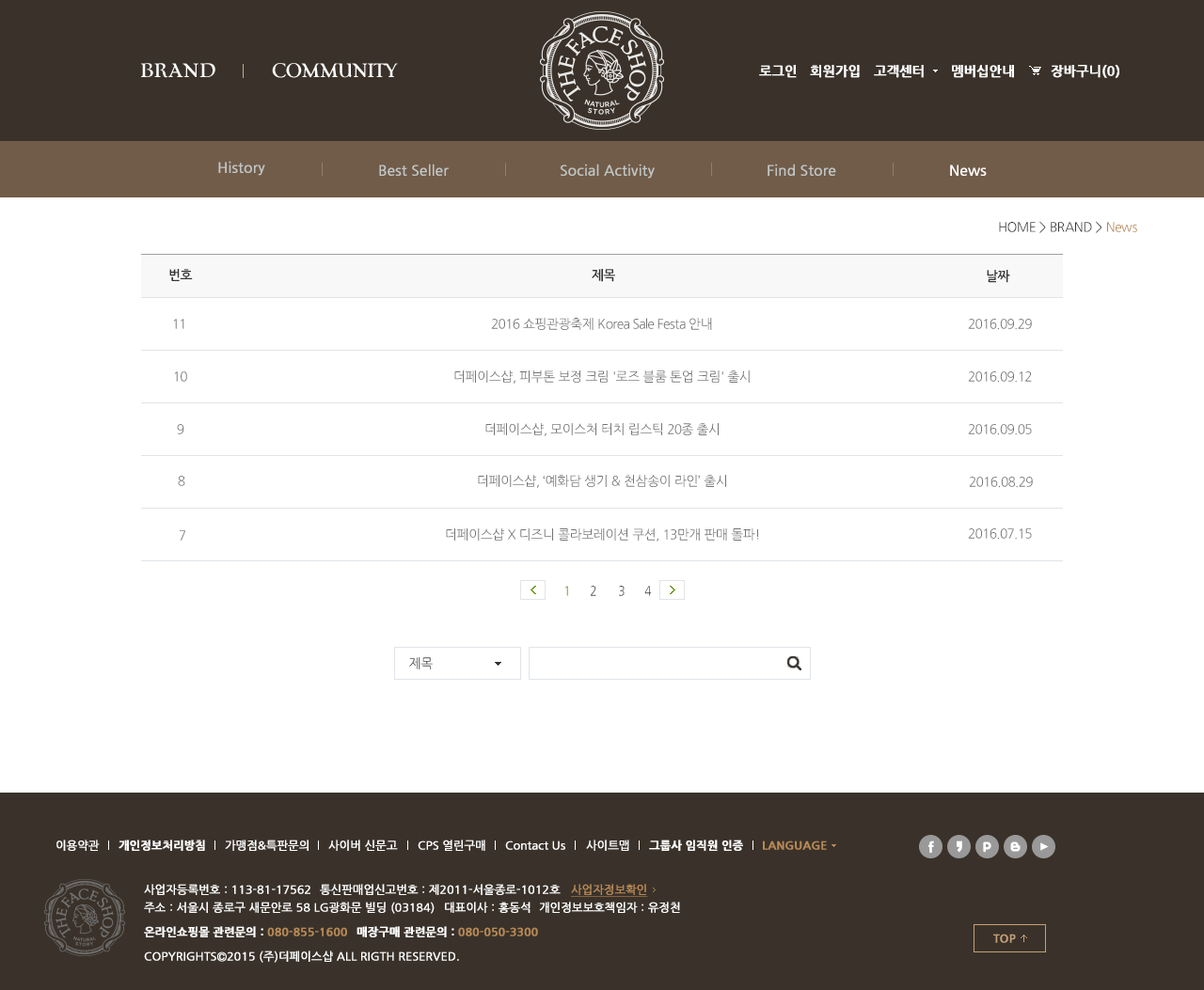
<style>
.page{position:relative;width:1204px;height:990px;background:#ffffff}
.page>*{position:absolute;margin:0}
.t1{font:13.2px "NanumGothicBold";color:#ffffff;font-weight:bold}
.t2{font:14.1px "NanumGothic";color:#c1c6c5;font-weight:bold}
.t3{font:14.1px "NanumGothic";color:#ffffff;font-weight:bold}
.t4{font:13.2px "NanumGothic";letter-spacing:-0.03em;color:#333333}
.t5{font:13.2px "NanumGothic";letter-spacing:-0.03em;color:#b68957}
.t6{font:13.2px "NanumGothicBold";letter-spacing:-0.03em;color:#333333}
.t7{font:13.2px "NanumGothic";letter-spacing:-0.03em;color:#737373}
.t8{font:13.2px "NanumGothic";letter-spacing:-0.03em}
.t9{font:13.2px "NanumGothic";letter-spacing:-0.03em;scale:0.85 1}
.t10{font:13.2px "NanumGothic";letter-spacing:-0.03em;color:#333333;scale:0.85 1}
.t11{font:11.3px "NanumGothic";color:#ffffff;font-weight:bold}
.t12{font:11.3px "NanumGothicBold";color:#ffffff;font-weight:bold}
.t13{font:11.3px "NanumGothicBold";color:#b68957;font-weight:bold}
.t14{font:11.3px "NanumGothic";color:#b68957;font-weight:bold;text-decoration:underline}
</style>
<div class="page">
<p class="t1" style="left:759px;top:65px;width:38px;height:13px">로그인</p>
<p class="t1" style="left:810px;top:65px;width:50px;height:13px">회원가입</p>
<p class="t1" style="left:874px;top:65px;width:50px;height:13px">고객센터</p>
<p class="t1" style="left:952px;top:65px;width:62px;height:13px">멤버십안내</p>
<p class="t1" style="left:1051px;top:65px;width:68px;height:13px">장바구니(0)</p>
<p class="t2" style="left:218px;top:161px;width:47px;height:15px">History</p>
<p class="t2" style="left:379px;top:164px;width:70px;height:12px">Best Seller</p>
<p class="t2" style="left:561px;top:164px;width:94px;height:15px">Social Activity</p>
<p class="t2" style="left:768px;top:164px;width:68px;height:12px">Find Store</p>
<p class="t3" style="left:950px;top:165px;width:37px;height:11px">News</p>
<p class="t4" style="left:999px;top:221px;width:138px;height:12px">HOME &gt; BRAND &gt; <span class="t5">News</span></p>
<p class="t6" style="left:169px;top:269px;width:24px;height:12px">번호</p>
<p class="t6" style="left:592px;top:269px;width:23px;height:13px">제목</p>
<p class="t6" style="left:987px;top:270px;width:23px;height:13px">날짜</p>
<p class="t7" style="left:491px;top:318px;width:221px;height:12px">2016 쇼핑관광축제 Korea Sale Festa 안내</p>
<p class="t8" style="left:173px;top:319px;width:11px;height:10px">11</p>
<p class="t7" style="left:968px;top:319px;width:64px;height:11px">2016.09.29</p>
<p class="t7" style="left:174px;top:372px;width:13px;height:10px">10</p>
<p class="t7" style="left:454px;top:371px;width:296px;height:13px">더페이스샵, 피부톤 보정 크림 '로즈 블룸 톤업 크림' 출시</p>
<p class="t7" style="left:968px;top:372px;width:64px;height:11px">2016.09.12</p>
<p class="t7" style="left:177px;top:424px;width:7px;height:11px">9</p>
<p class="t7" style="left:485px;top:423px;width:234px;height:13px">더페이스샵, 모이스처 터치 립스틱 20종 출시</p>
<p class="t7" style="left:968px;top:424px;width:64px;height:11px">2016.09.05</p>
<p class="t7" style="left:178px;top:476px;width:7px;height:10px">8</p>
<p class="t7" style="left:478px;top:475px;width:248px;height:13px">더페이스샵, ‘예화담 생기 &amp; 천삼송이 라인’ 출시</p>
<p class="t7" style="left:969px;top:477px;width:64px;height:11px">2016.08.29</p>
<p class="t7" style="left:179px;top:530px;width:6px;height:11px">7</p>
<p class="t7" style="left:446px;top:529px;width:313px;height:13px">더페이스샵 X 디즈니 콜라보레이션 쿠션, 13만개 판매 돌파!</p>
<p class="t7" style="left:968px;top:529px;width:64px;height:11px">2016.07.15</p>
<p class="t9" style="left:565px;top:586px;width:3px;height:10px">1</p>
<p class="t9" style="left:591px;top:586px;width:5px;height:10px">2</p>
<p class="t10" style="left:619px;top:586px;width:6px;height:10px">3</p>
<p class="t9" style="left:644px;top:586px;width:8px;height:10px">4</p>
<p class="t8" style="left:409px;top:657px;width:24px;height:13px">제목</p>
<p class="t11" style="left:56px;top:840px;width:44px;height:11px">이용약관</p>
<p class="t12" style="left:119px;top:840px;width:86px;height:11px">개인정보처리방침</p>
<p class="t11" style="left:225px;top:840px;width:84px;height:11px">가맹점&amp;특판문의</p>
<p class="t11" style="left:328px;top:840px;width:70px;height:11px">사이버 신문고</p>
<p class="t11" style="left:418px;top:840px;width:67px;height:11px">CPS 열린구매</p>
<p class="t11" style="left:505px;top:841px;width:60px;height:9px">Contact Us</p>
<p class="t11" style="left:586px;top:840px;width:43px;height:11px">사이트맵</p>
<p class="t12" style="left:649px;top:840px;width:94px;height:11px">그룹사 임직원 인증</p>
<p class="t13" style="left:763px;top:841px;width:64px;height:9px">LANGUAGE</p>
<p class="t11" style="left:144px;top:884px;width:166px;height:11px">사업자등록번호 : 113-81-17562</p>
<p class="t11" style="left:320px;top:884px;width:241px;height:11px">통신판매업신고번호 : 제2011-서울종로-1012호</p>
<p class="t14" style="left:571px;top:884px;width:77px;height:13px">사업자정보확인</p>
<p class="t11" style="left:144px;top:902px;width:291px;height:12px">주소 : 서울시 종로구 새문안로 58 LG광화문 빌딩 (03184)</p>
<p class="t11" style="left:445px;top:902px;width:85px;height:11px">대표이사 : 홍동석</p>
<p class="t11" style="left:539px;top:902px;width:141px;height:11px">개인정보보호책임자 : 유정천</p>
<p class="t12" style="left:144px;top:926px;width:203px;height:12px">온라인쇼핑몰 관련문의 : <span class="t13">080-855-1600</span></p>
<p class="t13" style="left:356px;top:926px;width:182px;height:12px"><span class="t12">매장구매 관련문의 : </span>080-050-3300</p>
<p class="t11" style="left:144px;top:951px;width:315px;height:12px">COPYRIGHTS©2015 (주)더페이스샵 ALL RIGTH RESERVED.</p>
</div>
